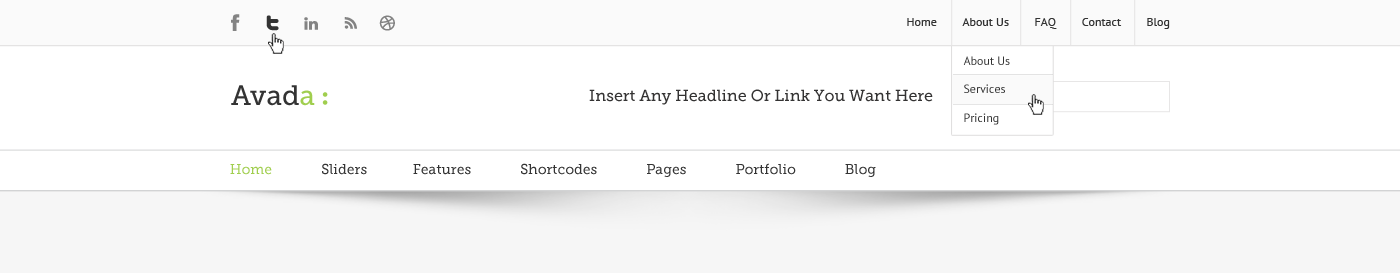
<style>
.page{position:relative;width:1400px;height:273px;background:#ffffff}
.page>*{position:absolute;margin:0}
.t1{font:12px "PTSans-Regular";color:#333333}
.t2{font:12px/24px "PTSans-Regular";color:#333333}
.t3{font:28px "MuseoSlab-500";color:#333333}
.t4{font:28px "MuseoSlab-500";color:#a0ce4e}
.t5{font:16px "MuseoSlab-500";color:#343333}
.t6{font:14px "MuseoSlab-500";color:#333333}
.t7{font:14px "MuseoSlab-500";color:#a0ce4e}
</style>
<div class="page">
<p class="t1" style="left:907px;top:18px;width:263px;height:11px">Home        About Us        FAQ        Contact        Blog</p>
<p class="t2" style="left:963px;top:56px;width:47px;height:69px">About Us<br>Services<br>Pricing</p>
<p class="t3" style="left:231px;top:85px;width:84px;height:21px">Avad<span class="t4">a</span></p>
<p class="t5" style="left:589px;top:89px;width:344px;height:16px">Insert Any Headline Or Link You Want Here</p>
<p class="t6" style="left:230px;top:163px;width:646px;height:14px"><span class="t7">Home              </span>Sliders             Features              Shortcodes              Pages              Portfolio              Blog</p>
</div>
